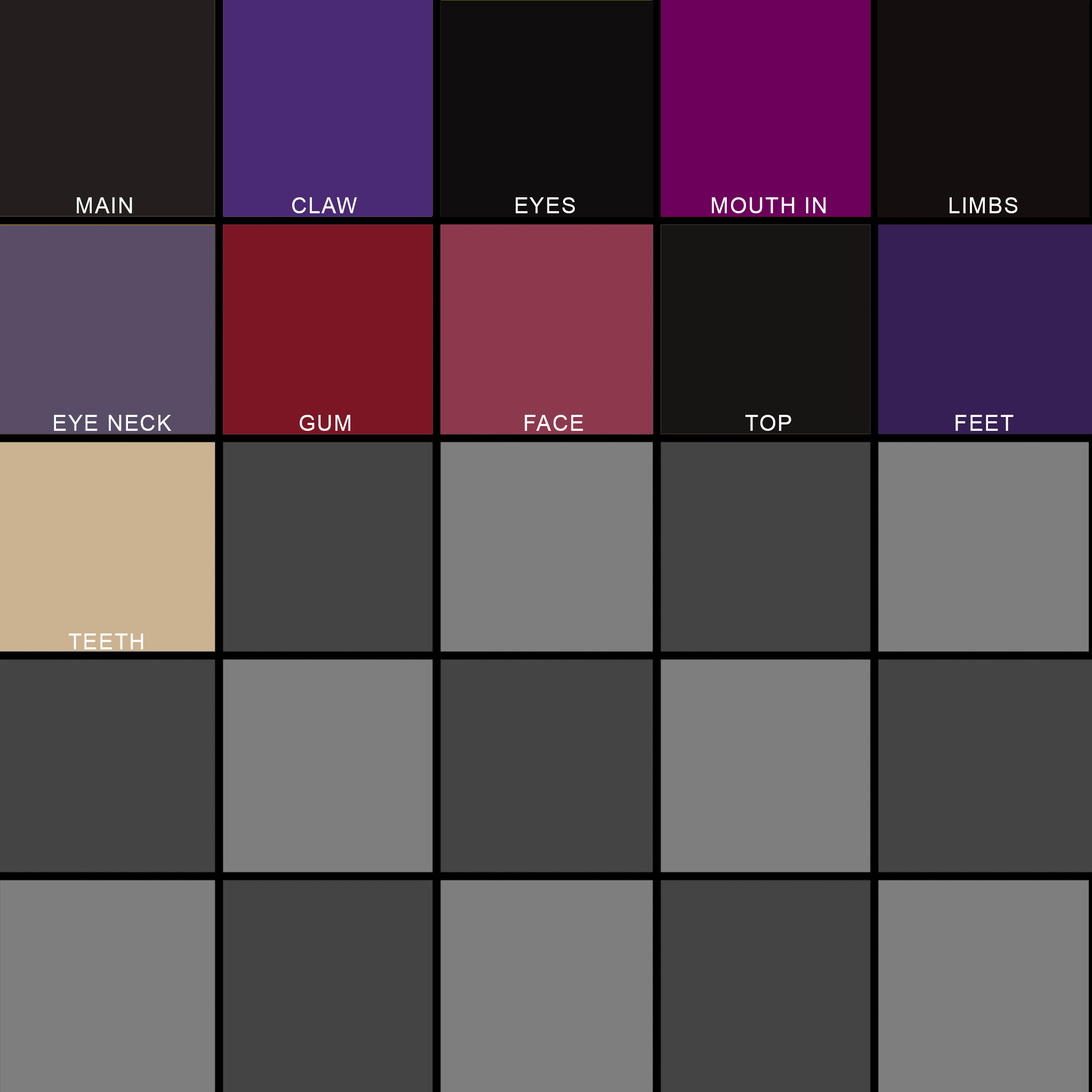
<style>
.page{position:relative;width:1092px;height:1092px;background:#7e7e7e}
.page>*{position:absolute;margin:0}
.t1{font:22.1px "ArialMT";letter-spacing:0.05em;color:#ffffff}
</style>
<div class="page">
<p class="t1" style="left:77px;top:197px;width:55px;height:16px">MAIN</p>
<p class="t1" style="left:292px;top:197px;width:65px;height:16px">CLAW</p>
<p class="t1" style="left:516px;top:197px;width:59px;height:16px">EYES</p>
<p class="t1" style="left:712px;top:197px;width:114px;height:16px">MOUTH IN</p>
<p class="t1" style="left:950px;top:197px;width:67px;height:16px">LIMBS</p>
<p class="t1" style="left:54px;top:415px;width:118px;height:16px">EYE NECK</p>
<p class="t1" style="left:300px;top:415px;width:50px;height:16px">GUM</p>
<p class="t1" style="left:525px;top:415px;width:58px;height:16px">FACE</p>
<p class="t1" style="left:745px;top:415px;width:46px;height:16px">TOP</p>
<p class="t1" style="left:955px;top:415px;width:59px;height:16px">FEET</p>
<p class="t1" style="left:69px;top:633px;width:74px;height:16px">TEETH</p>
</div>
